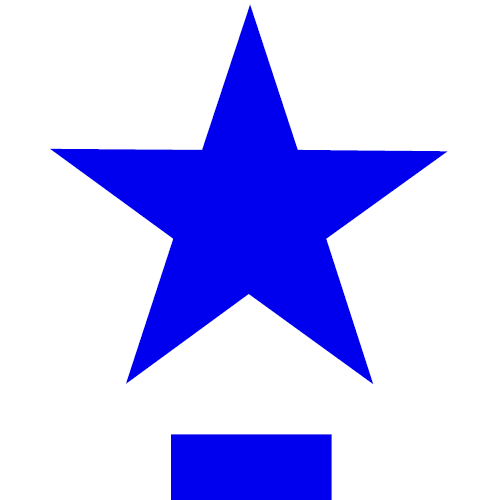
<style>
.page{position:relative;width:500px;height:500px;background:#ffffff}
.page>*{position:absolute;margin:0}
.t1{font:701.9px "AppleSymbols";letter-spacing:0.01em;color:#0000ee}
</style>
<div class="page">
<p class="t1" style="left:50px;top:4px;width:398px;height:381px">★</p>
</div>
